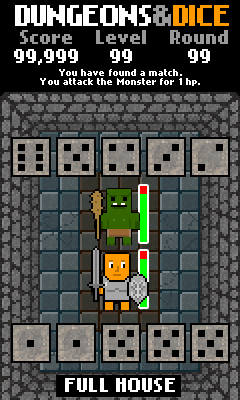
<style>
.page{position:relative;width:240px;height:400px;background:#000000}
.page>*{position:absolute;margin:0}
.t1{font:24px "NokiaCellphoneFC-Small";letter-spacing:-0.075em;color:#ffffff;text-transform:uppercase}
.t2{font:24px "NokiaCellphoneFC-Small";letter-spacing:-0.075em;color:#999999;text-transform:uppercase}
.t3{font:24px "NokiaCellphoneFC-Small";letter-spacing:-0.075em;color:#ff9900;text-transform:uppercase}
.t4{font:16px "NokiaCellphoneFC-Small";letter-spacing:0.01em;color:#ffffff}
.t5{font:16px "NokiaCellphoneFC-Small";letter-spacing:0.01em;color:#999999}
.t6{font:8px "NokiaCellphoneFC-Small";letter-spacing:0.01em;color:#ffffff}
</style>
<div class="page">
<p class="t1" style="left:15px;top:5px;width:214px;height:21px">DUNGEONs<span class="t2">&amp;</span><span class="t3">DICE</span></p>
<p class="t4" style="left:14px;top:30px;width:64px;height:35px;text-align:center"><span class="t5">Score<br></span>99,999</p>
<p class="t5" style="left:96px;top:30px;width:50px;height:33px;text-align:center">Level<br><span class="t4">99</span></p>
<p class="t5" style="left:170px;top:30px;width:58px;height:33px;text-align:center">Round<br><span class="t4">99</span></p>
<p class="t6" style="left:40px;top:69px;width:160px;height:17px;text-align:center">You have found a match.<br>You attack the Monster for 1 hp.</p>
<p class="t4" style="left:65px;top:378px;width:110px;height:14px">FULL HOUSE</p>
</div>
